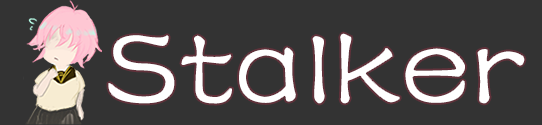
<style>
.page{position:relative;width:542px;height:125px;background:#333333}
.page>*{position:absolute;margin:0}
.t1{font:122.5px "FZSTK--GBK1-0";color:#ffffff;font-weight:bold}
</style>
<div class="page">
<p class="t1" style="left:107px;top:32px;width:419px;height:73px">Stalker</p>
</div>
